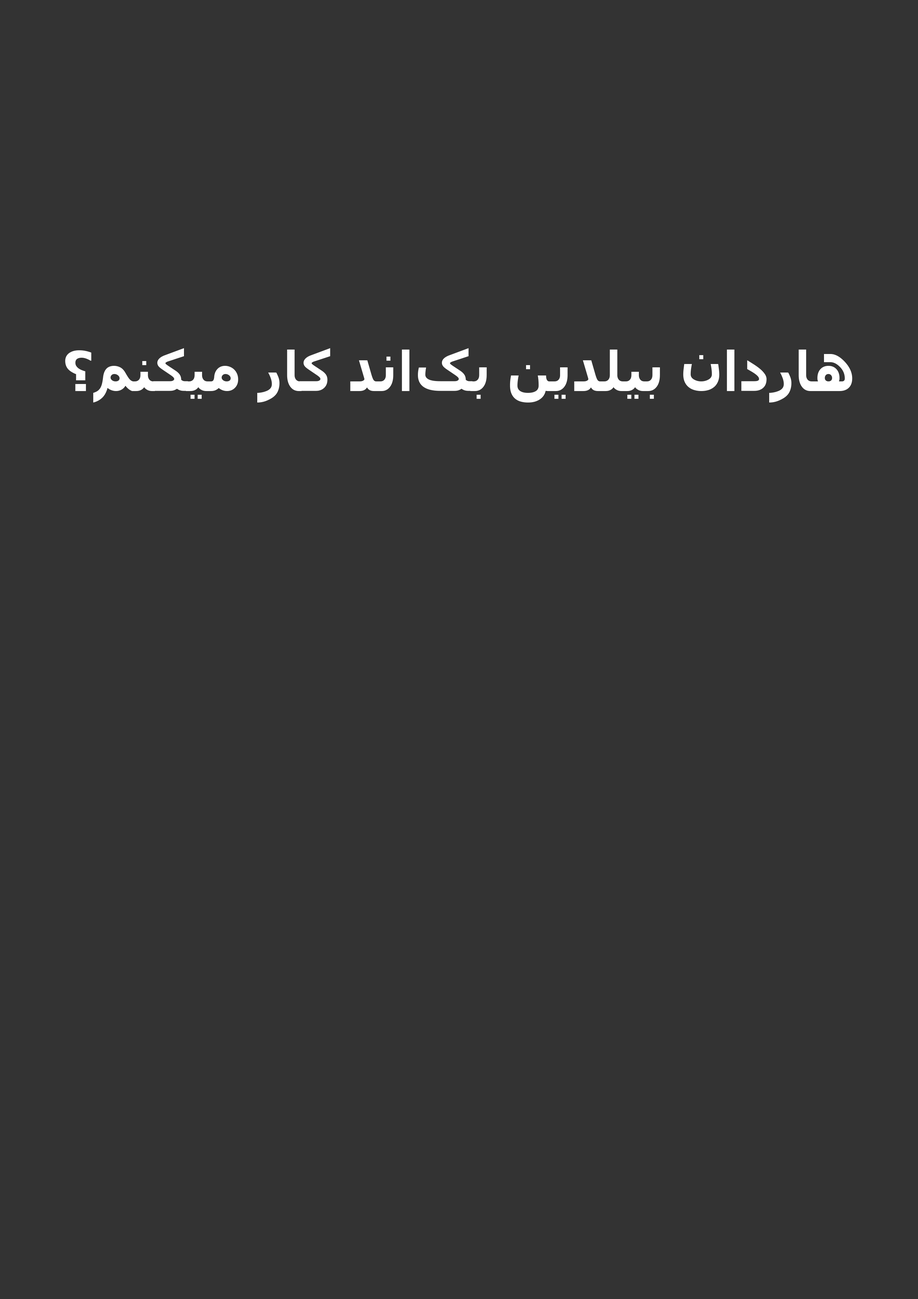
<style>
.page{position:relative;width:918px;height:1299px;background:#333333}
.page>*{position:absolute;margin:0}
.t1{font:54.7px "Tahoma-Bold";color:#ffffff}
</style>
<div class="page">
<p class="t1" style="left:65px;top:348px;width:788px;height:54px">هاردان بیلدین بک‌اند کار میکنم؟</p>
</div>
